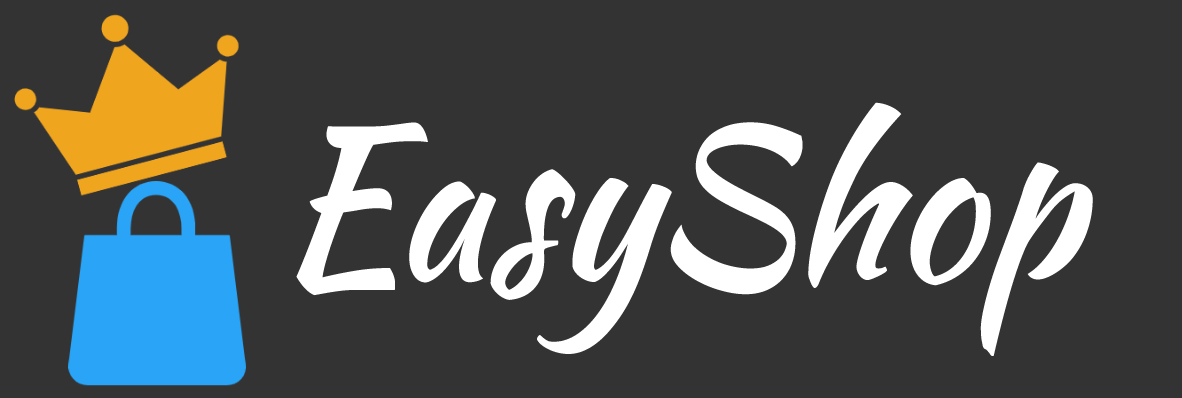
<style>
.page{position:relative;width:1182px;height:398px;background:#333333}
.page>*{position:absolute;margin:0}
.t1{font:210.7px "KaushanScript-Regular";color:#ffffff;scale:0.95 1}
</style>
<div class="page">
<p class="t1" style="left:296px;top:102px;width:797px;height:254px">EasyShop</p>
</div>
